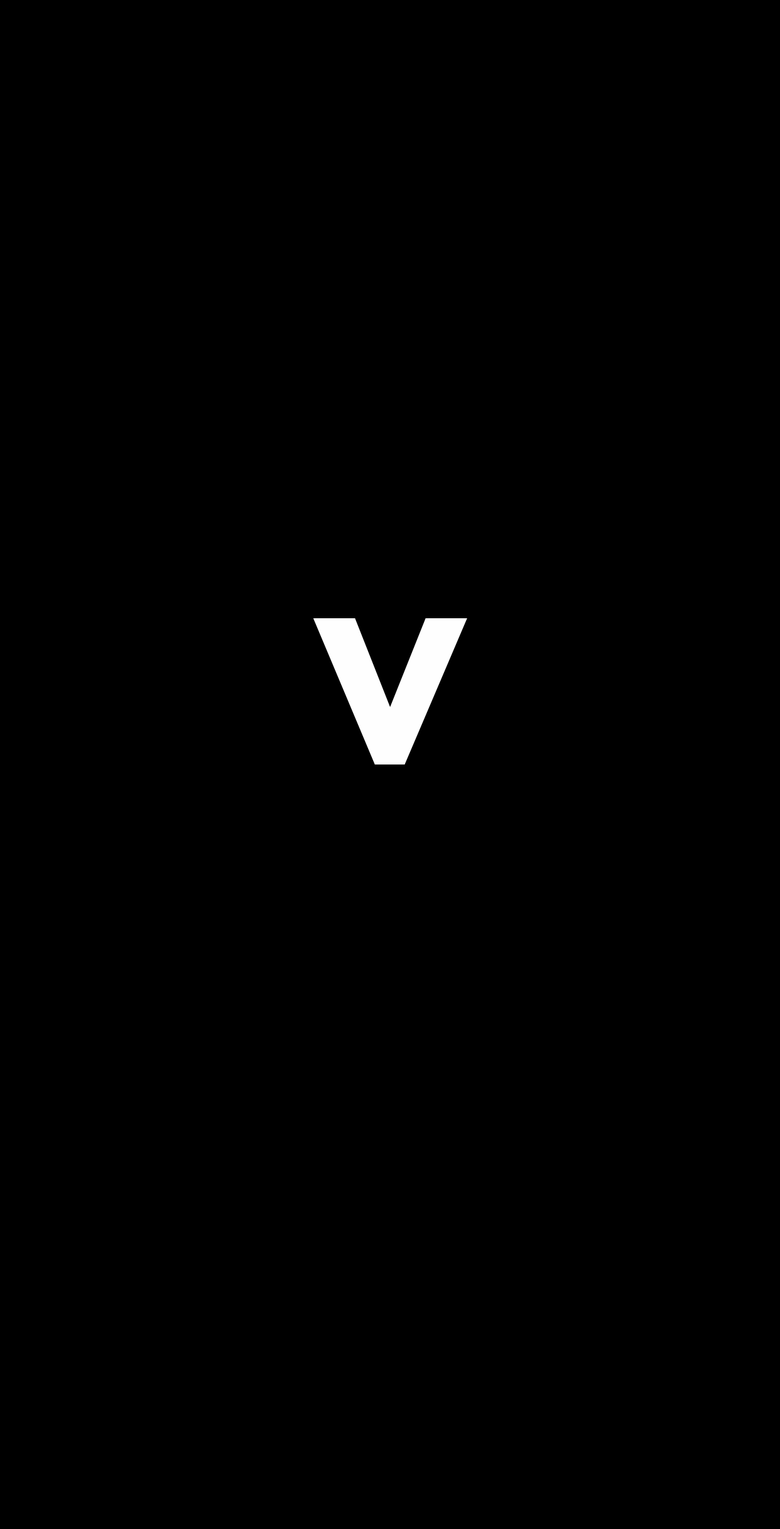
<style>
.page{position:relative;width:780px;height:1529px;background:#000000}
.page>*{position:absolute;margin:0}
.t1{font:219.7px "Futura-Bol";color:#fefefe}
</style>
<div class="page">
<p class="t1" style="left:313px;top:618px;width:154px;height:147px">V</p>
</div>
